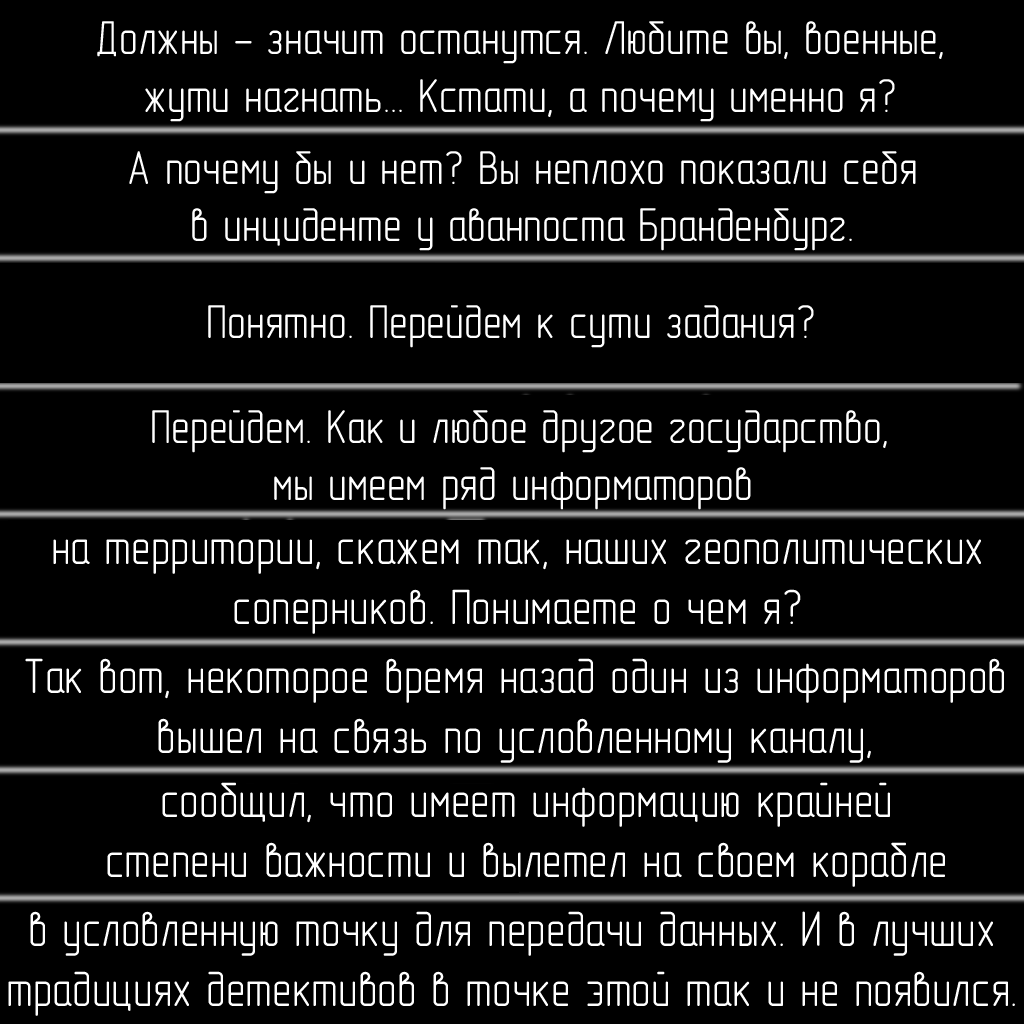
<style>
.page{position:relative;width:1024px;height:1024px;background:#000000}
.page>*{position:absolute;margin:0}
.t1{font:48px "GOST-2.304-81typeA";color:#ffffff}
.t2{font:50px "GOST-2.304-81typeA";color:#ffffff}
</style>
<div class="page">
<p class="t1" style="left:97px;top:21px;width:846px;height:101px;text-align:center">Должны - значит останутся. Любите вы, военные,<br>жути нагнать... Кстати, а почему именно я?</p>
<p class="t1" style="left:129px;top:151px;width:787px;height:100px;text-align:center">А почему бы и нет? Вы неплохо показали себя<br>в инциденте у аванпоста Бранденбург.</p>
<p class="t1" style="left:208px;top:305px;width:606px;height:43px">Понятно. Перейдем к сути задания?</p>
<p class="t1" style="left:152px;top:410px;width:735px;height:100px;text-align:center">Перейдем. Как и любое другое государство,<br>мы имеем ряд информаторов</p>
<p class="t2" style="left:53px;top:539px;width:928px;height:95px;text-align:center">на территории, скажем так, наших геополитических<br>соперников. Понимаете о чем я?</p>
<p class="t2" style="left:25px;top:658px;width:979px;height:105px;text-align:center">Так вот, некоторое время назад один из информаторов<br>вышел на связь по условленному каналу,</p>
<p class="t2" style="left:107px;top:782px;width:838px;height:105px;text-align:center">сообщил, что имеет информацию крайней<br>степени важности и вылетел на своем корабле</p>
<p class="t2" style="left:8px;top:911px;width:1007px;height:105px;text-align:center">в условленную точку для передачи данных. И в лучших<br>традициях детективов в точке этой так и не появился.</p>
</div>
